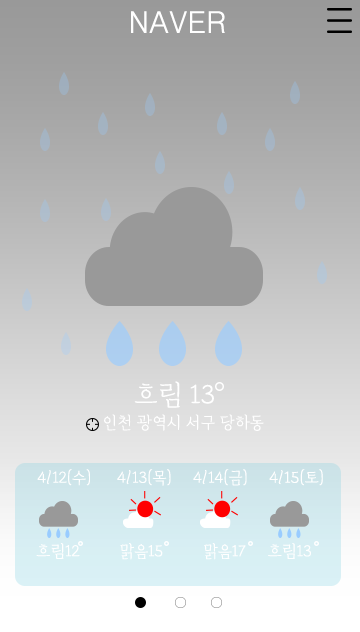
<style>
.page{position:relative;width:360px;height:632px}
.page>*{position:absolute;margin:0}
.t1{font:30px "Dotum";color:#ffffff}
.t2{font:29.8px "Cafe24Oneprettynight";color:#ffffff}
.t3{font:18px "Cafe24Oneprettynight";color:#ffffff}
</style>
<div class="page">
<p class="t1" style="left:131px;top:11px;width:94px;height:22px">NAVER</p>
<p class="t2" style="left:134px;top:381px;width:80px;height:27px">흐림 13</p>
<p class="t3" style="left:104px;top:414px;width:160px;height:17px">인천 광역시 서구 당하동</p>
<p class="t3" style="left:37px;top:469px;width:286px;height:17px">4/12(수)      4/13(목)     4/14(금)     4/15(토)</p>
<p class="t3" style="left:36px;top:543px;width:275px;height:17px">흐림12         맑음15         맑음17     흐림13</p>
</div>
